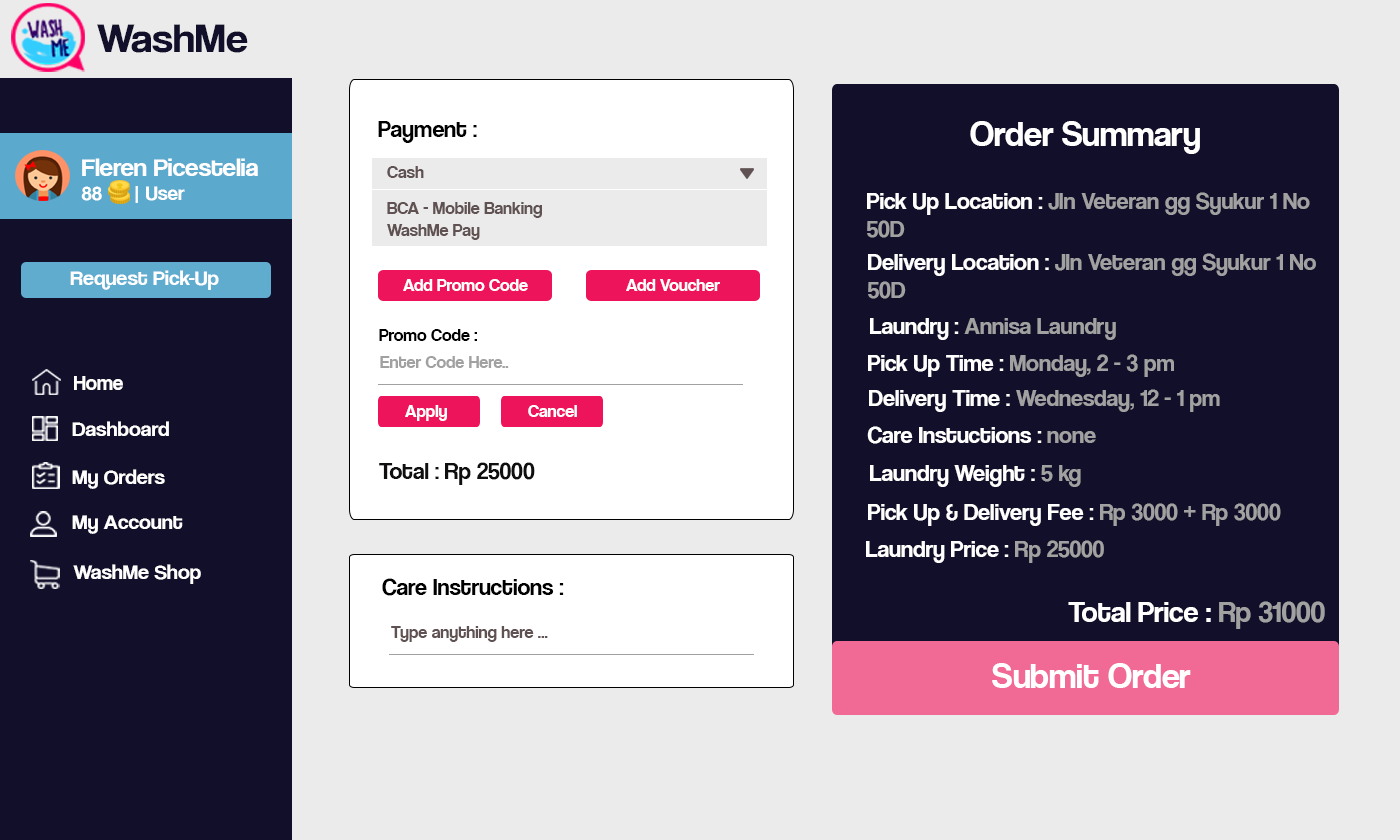
<style>
.page{position:relative;width:1400px;height:840px;background:#120f2b}
.page>*{position:absolute;margin:0}
.t1{font:42.1px "CoolveticaRg-Regular";color:#120f2b;scale:1.05 1}
.t2{font:24px "CoolveticaRg-Regular";color:#000000}
.t3{font:36px "CoolveticaRg-Regular";color:#ffffff}
.t4{font:25.2px "CoolveticaRg-Regular";color:#ffffff;scale:1.05 1}
.t5{font:20px "CoolveticaRg-Regular";color:#ffffff;scale:1.05 1}
.t6{font:18px "CoolveticaRg-Regular";color:#605252}
.t7{font:24px "CoolveticaRg-Regular";color:#a1a1a1}
.t8{font:24px "CoolveticaRg-Regular";color:#ffffff}
.t9{font:21px "CoolveticaRg-Regular";color:#ffffff;scale:1.05 1}
.t10{font:18px "CoolveticaRg-Regular";color:#ffffff}
.t11{font:18px "CoolveticaRg-Regular";color:#000000}
.t12{font:17.8px "CoolveticaRg-Regular";color:#a1a1a1}
.t13{font:21px "CoolveticaRg-Regular";color:#ffffff}
.t14{font:24px "CoolveticaRg-Regular";color:#100e0e}
.t15{font:30px "CoolveticaRg-Regular";color:#ffffff}
.t16{font:30px "CoolveticaRg-Regular";color:#a1a1a1}
.t17{font:17.8px "CoolveticaRg-Regular";color:#605252}
</style>
<div class="page">
<p class="t1" style="left:97px;top:24px;width:151px;height:29px">WashMe</p>
<p class="t2" style="left:378px;top:121px;width:99px;height:22px">Payment :</p>
<p class="t3" style="left:970px;top:121px;width:230px;height:33px">Order Summary</p>
<p class="t4" style="left:81px;top:158px;width:177px;height:45px">Fleren Picestelia<br><span class="t5">88      | User</span></p>
<p class="t6" style="left:387px;top:166px;width:37px;height:12px">Cash</p>
<p class="t7" style="left:867px;top:192px;width:443px;height:46px"><span class="t8">Pick Up Location : </span>Jln Veteran gg Syukur 1 No<br>50D</p>
<p class="t6" style="left:387px;top:202px;width:155px;height:38px">BCA - Mobile Banking<br>WashMe Pay</p>
<p class="t7" style="left:868px;top:253px;width:448px;height:46px"><span class="t8">Delivery Location : </span>Jln Veteran gg Syukur 1 No<br>50D</p>
<p class="t9" style="left:70px;top:270px;width:149px;height:20px">Request Pick-Up</p>
<p class="t10" style="left:403px;top:279px;width:125px;height:12px">Add Promo Code</p>
<p class="t10" style="left:626px;top:279px;width:94px;height:12px">Add Voucher</p>
<p class="t7" style="left:870px;top:318px;width:246px;height:22px"><span class="t8">Laundry : </span>Annisa Laundry</p>
<p class="t11" style="left:379px;top:329px;width:98px;height:12px">Promo Code :</p>
<p class="t12" style="left:380px;top:356px;width:129px;height:12px">Enter Code Here..</p>
<p class="t7" style="left:868px;top:354px;width:306px;height:23px"><span class="t8">Pick Up Time : </span>Monday, 2 - 3 pm</p>
<p class="t13" style="left:74px;top:376px;width:49px;height:14px">Home</p>
<p class="t7" style="left:869px;top:389px;width:351px;height:23px"><span class="t8">Delivery Time : </span>Wednesday, 12 - 1 pm</p>
<p class="t10" style="left:405px;top:405px;width:42px;height:16px">Apply</p>
<p class="t10" style="left:528px;top:405px;width:49px;height:12px">Cancel</p>
<p class="t9" style="left:72px;top:421px;width:97px;height:15px">Dashboard</p>
<p class="t8" style="left:867px;top:426px;width:229px;height:18px">Care Instuctions : <span class="t7">none</span></p>
<p class="t14" style="left:379px;top:462px;width:156px;height:23px">Total : Rp 25000</p>
<p class="t9" style="left:72px;top:469px;width:93px;height:20px">My Orders</p>
<p class="t8" style="left:870px;top:465px;width:211px;height:22px">Laundry Weight : <span class="t7">5 kg</span></p>
<p class="t8" style="left:868px;top:503px;width:413px;height:23px">Pick Up &amp; Delivery Fee : <span class="t7">Rp 3000 + Rp 3000</span></p>
<p class="t9" style="left:72px;top:515px;width:111px;height:19px">My Account</p>
<p class="t8" style="left:866px;top:540px;width:238px;height:23px">Laundry Price : <span class="t7">Rp 25000</span></p>
<p class="t9" style="left:73px;top:564px;width:128px;height:20px">WashMe Shop</p>
<p class="t2" style="left:382px;top:578px;width:182px;height:18px">Care Instructions :</p>
<p class="t15" style="left:1068px;top:601px;width:257px;height:28px">Total Price : <span class="t16">Rp 31000</span></p>
<p class="t17" style="left:391px;top:626px;width:157px;height:16px">Type anything here ...</p>
<p class="t3" style="left:992px;top:663px;width:199px;height:25px">Submit Order</p>
</div>
